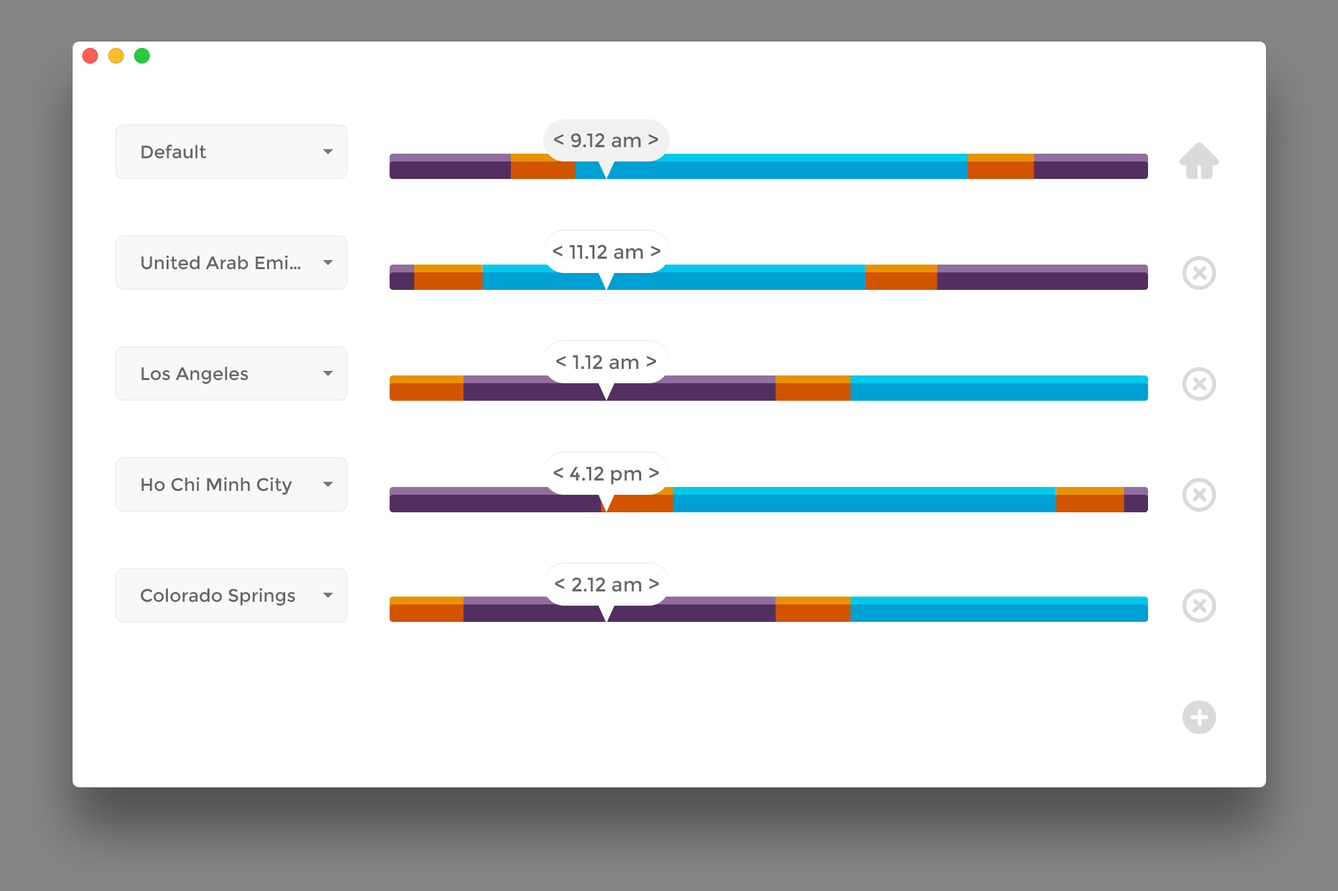
<style>
.page{position:relative;width:1338px;height:891px;background:#ffffff}
.page>*{position:absolute;margin:0}
.t1{font:19.5px "Montserrat-Regular";color:#666666}
.t2{font:18px "Montserrat-Regular";color:#666666}
</style>
<div class="page">
<p class="t1" style="left:554px;top:133px;width:104px;height:15px">&lt; 9.12 am &gt;</p>
<p class="t2" style="left:141px;top:145px;width:66px;height:14px">Default</p>
<p class="t1" style="left:553px;top:244px;width:108px;height:15px">&lt; 11.12 am &gt;</p>
<p class="t2" style="left:141px;top:255px;width:160px;height:15px">United Arab Emi…</p>
<p class="t1" style="left:556px;top:355px;width:100px;height:15px">&lt; 1.12 am &gt;</p>
<p class="t2" style="left:141px;top:366px;width:107px;height:18px">Los Angeles</p>
<p class="t1" style="left:554px;top:466px;width:105px;height:18px">&lt; 4.12 pm &gt;</p>
<p class="t2" style="left:141px;top:477px;width:151px;height:18px">Ho Chi Minh City</p>
<p class="t1" style="left:555px;top:577px;width:104px;height:15px">&lt; 2.12 am &gt;</p>
<p class="t2" style="left:141px;top:588px;width:154px;height:18px">Colorado Springs</p>
</div>
